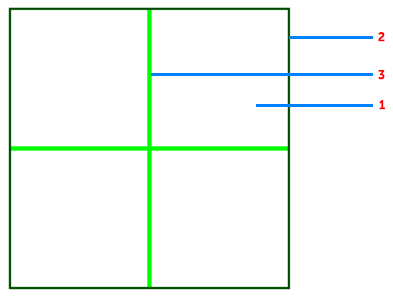
<style>
.page{position:relative;width:393px;height:298px;background:#ffffff}
.page>*{position:absolute;margin:0}
.t1{font:12.5px "MuseoSansCyrl-700";letter-spacing:0.075em;color:#ff0000}
</style>
<div class="page">
<p class="t1" style="left:378px;top:32px;width:7px;height:10px">2</p>
<p class="t1" style="left:378px;top:70px;width:7px;height:10px">3</p>
<p class="t1" style="left:379px;top:100px;width:6px;height:10px">1</p>
</div>
